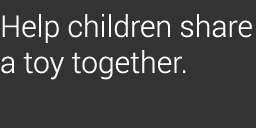
<style>
.page{position:relative;width:256px;height:128px;background:#333333}
.page>*{position:absolute;margin:0}
.t1{font:30px "Roboto-Light";color:#ffffff}
</style>
<div class="page">
<p class="t1" style="left:1px;top:14px;width:251px;height:66px">Help children share a toy together.</p>
</div>
